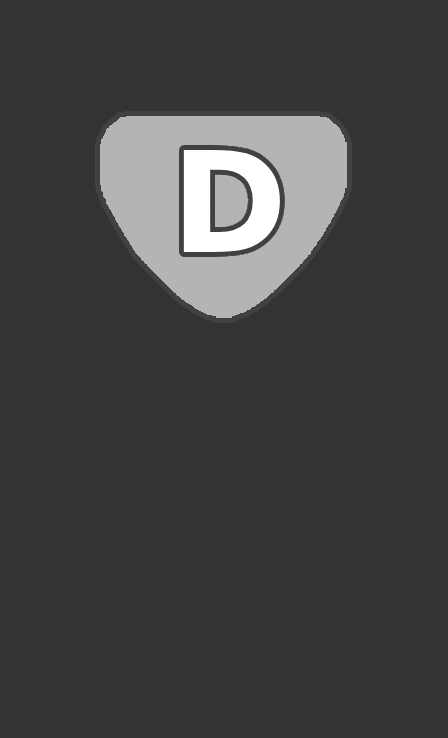
<style>
.page{position:relative;width:448px;height:738px;background:#333333}
.page>*{position:absolute;margin:0}
.t1{font:140px "DejaVuSans-Bold";color:#ffffff}
</style>
<div class="page">
<p class="t1" style="left:183px;top:149px;width:97px;height:103px">D</p>
</div>
